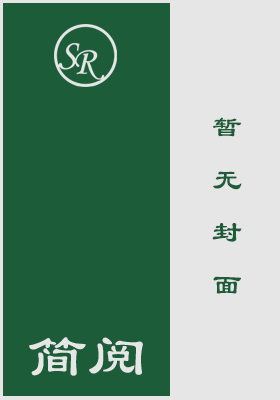
<style>
.page{position:relative;width:280px;height:400px;background:#1c5c38}
.page>*{position:absolute;margin:0}
.t1{font:30px "LiSu";color:#1c5c38}
</style>
<div class="page">
<p class="t1" style="left:212px;top:117px;width:30px;height:177px">暂<br>无<br>封<br>面</p>
</div>
